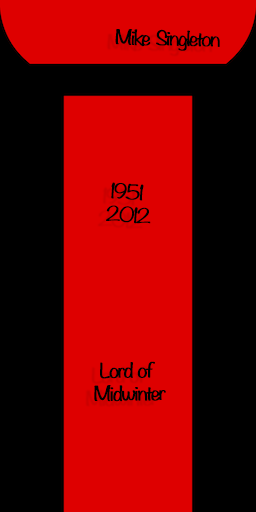
<style>
.page{position:relative;width:256px;height:512px;background:#000000}
.page>*{position:absolute;margin:0}
.t1{font:17.7px "Noteworthy-Light";letter-spacing:-0.075em;color:#000000;font-weight:bold;scale:1.2 1}
.t2{font:18px "Noteworthy-Light";letter-spacing:-0.075em;color:#000000;font-weight:bold;scale:1.2 1}
</style>
<div class="page">
<p class="t1" style="left:115px;top:29px;width:36px;height:18px;rotate:1deg">Mike</p>
<p class="t1" style="left:156px;top:29px;width:64px;height:22px;rotate:1deg">Singleton</p>
<p class="t2" style="left:106px;top:182px;width:45px;height:42px;text-align:center;rotate:4deg">1951 <br>2012</p>
<p class="t2" style="left:94px;top:361px;width:72px;height:41px;text-align:center;rotate:-1deg">Lord of <br>Midwinter</p>
</div>
